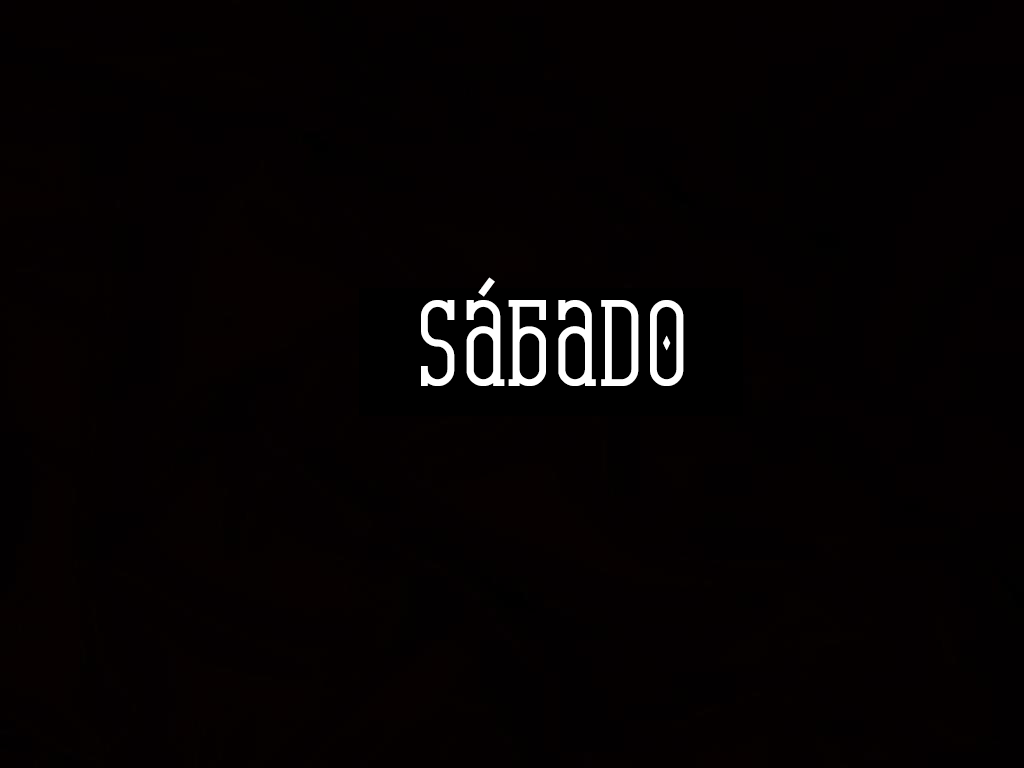
<style>
.page{position:relative;width:1024px;height:768px;background:#040000}
.page>*{position:absolute;margin:0}
.t1{font:132px "CatharsisRequiemBold";letter-spacing:-0.003em;color:#ffffff}
</style>
<div class="page">
<p class="t1" style="left:421px;top:277px;width:263px;height:109px">sábado</p>
</div>
